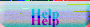
<style>
.page{position:relative;width:90px;height:27px}
.page>*{position:absolute;margin:0}
.t1{font:14px "TimesNewRomanPS-BoldMT"}
</style>
<div class="page">
<p class="t1" style="left:30px;top:8px;width:29px;height:13px">Help</p>
</div>
